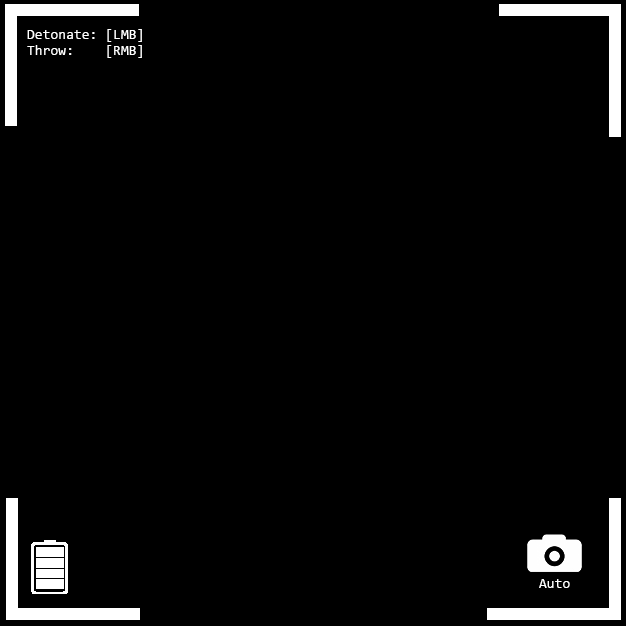
<style>
.page{position:relative;width:626px;height:626px;background:#000000}
.page>*{position:absolute;margin:0}
.t1{font:14.2px "Consolas";color:#ffffff}
</style>
<div class="page">
<p class="t1" style="left:27px;top:29px;width:115px;height:13px">Detonate: [LMB]</p>
<p class="t1" style="left:27px;top:45px;width:115px;height:13px">Throw:    [RMB]</p>
<p class="t1" style="left:539px;top:579px;width:31px;height:9px">Auto</p>
</div>
